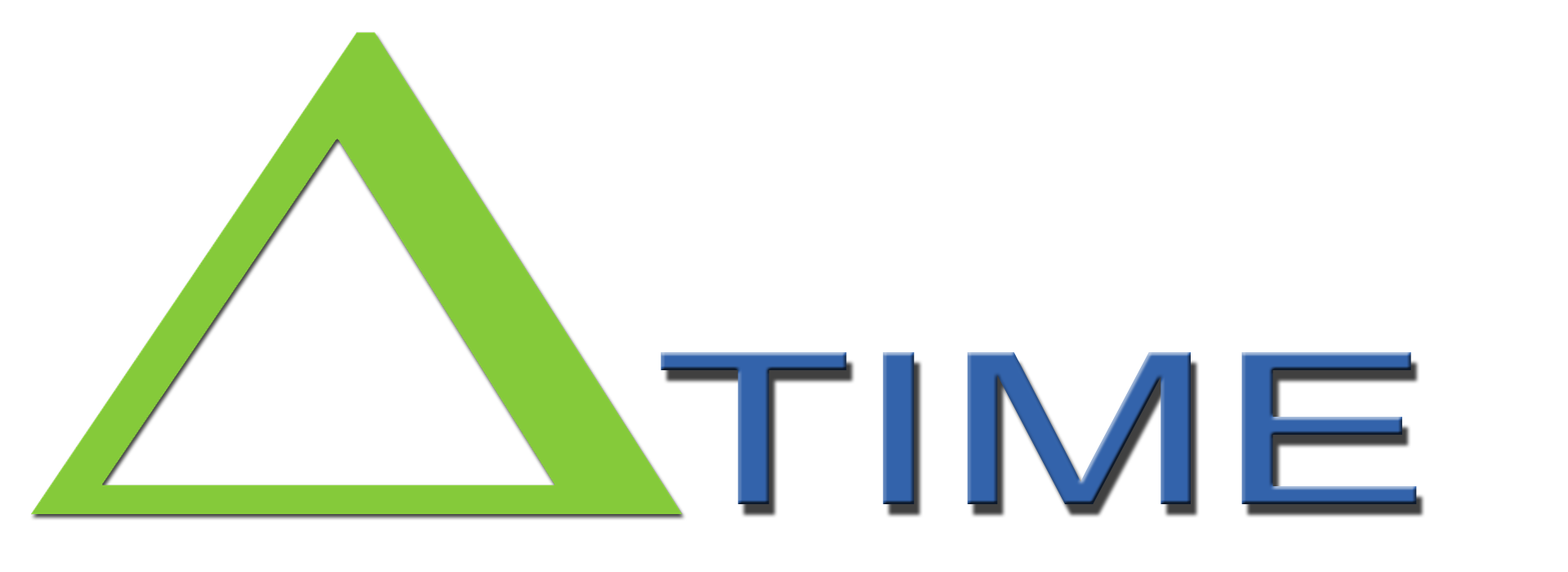
<style>
.page{position:relative;width:1568px;height:572px;background:#ffffff}
.page>*{position:absolute;margin:0}
.t1{font:211.7px "ArialMT";color:#3363ab;scale:1.54 1}
</style>
<div class="page">
<p class="t1" style="left:661px;top:352px;width:756px;height:152px">TIME</p>
</div>
